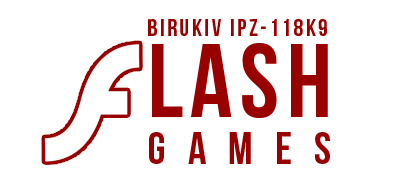
<style>
.page{position:relative;width:393px;height:186px;background:#ffffff}
.page>*{position:absolute;margin:0}
.t1{font:24px/81.3px "BebasNeueBold";letter-spacing:0.11em;color:#990100}
.t2{font:104.5px/81.3px "BebasNeueBold";letter-spacing:0.07em;color:#990100}
.t3{font:45.5px/46.4px "BebasNeueBold";letter-spacing:0.49em;color:#990100}
</style>
<div class="page">
<p class="t1" style="left:148px;top:19px;width:182px;height:145px">Birukiv ipz-118k9<br><span class="t2">lash<br></span><span class="t3">games</span></p>
</div>
